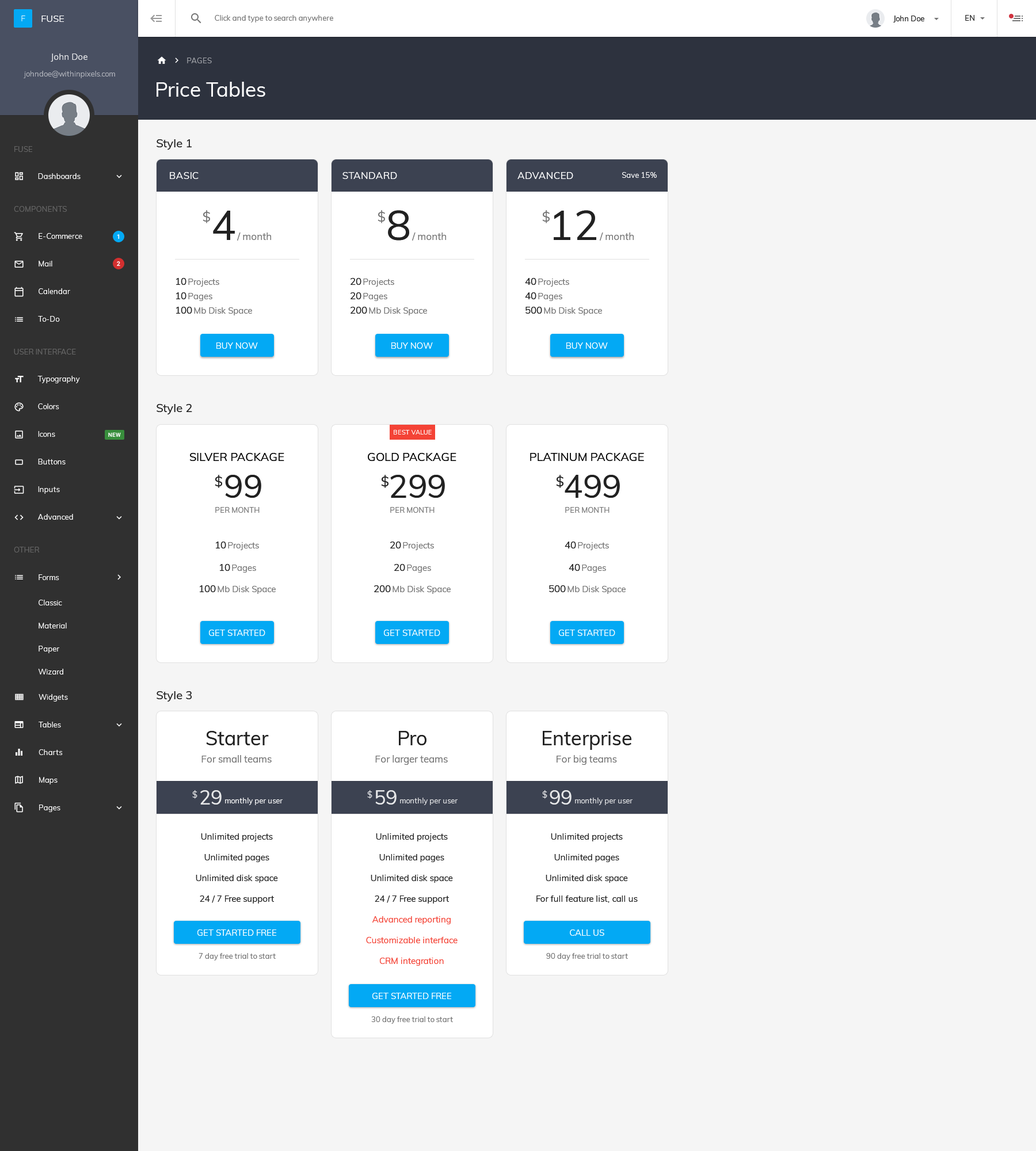
<style>
.page{position:relative;width:1036px;height:1151px;background:#f5f5f5}
.page>*{position:absolute;margin:0}
.t1{font:7.5px "Muli-Regular";color:#9fa1a6}
.t2{font:20.1px "Muli-Regular";color:#ffffff}
.t3{font:11.5px "Muli-Regular";color:#202020}
.t4{font:9.8px "Muli-Regular";color:#ffffff}
.t5{font:7.5px "Muli-Regular";color:#ffffff}
.t6{font:13.8px "Muli-Regular";color:#757575}
.t7{font:41.4px "Muli-Regular";color:#212121}
.t8{font:9.8px "Muli-Regular";color:#757575}
.t9{font:9.8px "Muli-Regular";color:#212121}
.t10{font:8.6px "Muli-Regular";color:#757575}
.t11{font:8.6px "Muli-Regular";color:#ffffff}
.t12{font:6.3px "Muli-Regular";color:#ffffff}
.t13{font:11.5px "Muli-Regular";color:#000000}
.t14{font:13.8px "Muli-Regular";color:#212121}
.t15{font:32.2px "Muli-Regular";color:#212121}
.t16{font:7.5px "Muli-Regular";color:#757575}
.t17{font:19.6px "Muli-Regular";color:#212121}
.t18{font:8.6px "Muli-Regular";color:#e6e7e8}
.t19{font:19.6px "Muli-Regular";color:#e6e7e8}
.t20{font:7.5px "Muli-Regular";color:#e6e7e8}
.t21{font:8.6px/20.7px "Muli-Regular";color:#212121}
.t22{font:8.6px/20.7px "Muli-Regular";color:#f44336}
</style>
<div class="page">
<p class="t1" style="left:187px;top:58px;width:25px;height:5px">PAGES</p>
<p class="t2" style="left:157px;top:82px;width:108px;height:15px">Price Tables</p>
<p class="t3" style="left:157px;top:139px;width:35px;height:11px">Style 1</p>
<p class="t4" style="left:170px;top:172px;width:29px;height:7px">BASIC</p>
<p class="t4" style="left:342px;top:172px;width:55px;height:7px">STANDARD</p>
<p class="t4" style="left:517px;top:172px;width:56px;height:7px">ADVANCED</p>
<p class="t5" style="left:622px;top:172px;width:35px;height:6px">Save 15%</p>
<p class="t6" style="left:203px;top:210px;width:7px;height:13px">$</p>
<p class="t7" style="left:213px;top:211px;width:22px;height:29px">4</p>
<p class="t6" style="left:378px;top:210px;width:7px;height:13px">$</p>
<p class="t7" style="left:388px;top:210px;width:21px;height:31px">8</p>
<p class="t6" style="left:542px;top:210px;width:8px;height:13px">$</p>
<p class="t7" style="left:554px;top:210px;width:42px;height:30px">12</p>
<p class="t8" style="left:237px;top:233px;width:34px;height:8px">/ month</p>
<p class="t8" style="left:412px;top:233px;width:34px;height:8px">/ month</p>
<p class="t8" style="left:600px;top:233px;width:34px;height:8px">/ month</p>
<p class="t9" style="left:176px;top:278px;width:10px;height:7px">10</p>
<p class="t10" style="left:188px;top:279px;width:31px;height:8px">Projects</p>
<p class="t9" style="left:350px;top:278px;width:11px;height:7px">20</p>
<p class="t10" style="left:363px;top:279px;width:31px;height:8px">Projects</p>
<p class="t9" style="left:525px;top:278px;width:11px;height:7px">40</p>
<p class="t10" style="left:538px;top:279px;width:31px;height:8px">Projects</p>
<p class="t9" style="left:176px;top:292px;width:10px;height:7px">10</p>
<p class="t10" style="left:188px;top:293px;width:24px;height:8px">Pages</p>
<p class="t9" style="left:350px;top:292px;width:11px;height:7px">20</p>
<p class="t10" style="left:363px;top:293px;width:24px;height:8px">Pages</p>
<p class="t9" style="left:525px;top:292px;width:11px;height:7px">40</p>
<p class="t10" style="left:538px;top:293px;width:24px;height:8px">Pages</p>
<p class="t9" style="left:176px;top:307px;width:16px;height:7px">100</p>
<p class="t10" style="left:194px;top:307px;width:58px;height:8px">Mb Disk Space</p>
<p class="t9" style="left:350px;top:307px;width:17px;height:7px">200</p>
<p class="t10" style="left:369px;top:307px;width:58px;height:8px">Mb Disk Space</p>
<p class="t9" style="left:525px;top:307px;width:17px;height:7px">500</p>
<p class="t10" style="left:544px;top:307px;width:58px;height:8px">Mb Disk Space</p>
<p class="t11" style="left:216px;top:342px;width:42px;height:7px">BUY NOW</p>
<p class="t11" style="left:391px;top:342px;width:42px;height:7px">BUY NOW</p>
<p class="t11" style="left:566px;top:342px;width:42px;height:7px">BUY NOW</p>
<p class="t3" style="left:157px;top:404px;width:35px;height:11px">Style 2</p>
<p class="t12" style="left:394px;top:430px;width:38px;height:5px">BEST VALUE</p>
<p class="t13" style="left:190px;top:453px;width:94px;height:8px">SILVER PACKAGE</p>
<p class="t13" style="left:368px;top:453px;width:88px;height:8px">GOLD PACKAGE</p>
<p class="t13" style="left:530px;top:453px;width:114px;height:8px">PLATINUM PACKAGE</p>
<p class="t14" style="left:215px;top:475px;width:7px;height:13px">$</p>
<p class="t15" style="left:225px;top:475px;width:36px;height:23px">99</p>
<p class="t14" style="left:381px;top:475px;width:7px;height:13px">$</p>
<p class="t15" style="left:390px;top:475px;width:55px;height:23px">299</p>
<p class="t14" style="left:556px;top:475px;width:7px;height:13px">$</p>
<p class="t15" style="left:565px;top:475px;width:55px;height:23px">499</p>
<p class="t16" style="left:215px;top:507px;width:45px;height:6px">PER MONTH</p>
<p class="t16" style="left:390px;top:507px;width:45px;height:6px">PER MONTH</p>
<p class="t16" style="left:565px;top:507px;width:44px;height:6px">PER MONTH</p>
<p class="t9" style="left:216px;top:542px;width:10px;height:6px">10</p>
<p class="t10" style="left:228px;top:542px;width:31px;height:8px">Projects</p>
<p class="t9" style="left:390px;top:542px;width:11px;height:6px">20</p>
<p class="t10" style="left:403px;top:542px;width:31px;height:8px">Projects</p>
<p class="t9" style="left:565px;top:542px;width:11px;height:6px">40</p>
<p class="t10" style="left:578px;top:542px;width:31px;height:8px">Projects</p>
<p class="t9" style="left:220px;top:564px;width:10px;height:7px">10</p>
<p class="t10" style="left:232px;top:565px;width:24px;height:8px">Pages</p>
<p class="t9" style="left:394px;top:564px;width:11px;height:7px">20</p>
<p class="t10" style="left:407px;top:565px;width:24px;height:8px">Pages</p>
<p class="t9" style="left:569px;top:564px;width:11px;height:7px">40</p>
<p class="t10" style="left:582px;top:565px;width:24px;height:8px">Pages</p>
<p class="t9" style="left:200px;top:585px;width:16px;height:7px">100</p>
<p class="t10" style="left:218px;top:586px;width:58px;height:8px">Mb Disk Space</p>
<p class="t9" style="left:374px;top:585px;width:17px;height:7px">200</p>
<p class="t10" style="left:393px;top:586px;width:58px;height:8px">Mb Disk Space</p>
<p class="t9" style="left:549px;top:585px;width:17px;height:7px">500</p>
<p class="t10" style="left:567px;top:586px;width:59px;height:8px">Mb Disk Space</p>
<p class="t11" style="left:209px;top:630px;width:56px;height:6px">GET STARTED</p>
<p class="t11" style="left:384px;top:630px;width:56px;height:6px">GET STARTED</p>
<p class="t11" style="left:559px;top:630px;width:56px;height:6px">GET STARTED</p>
<p class="t3" style="left:157px;top:691px;width:35px;height:11px">Style 3</p>
<p class="t17" style="left:206px;top:731px;width:63px;height:14px">Starter</p>
<p class="t17" style="left:399px;top:731px;width:27px;height:14px">Pro</p>
<p class="t17" style="left:543px;top:731px;width:88px;height:19px">Enterprise</p>
<p class="t8" style="left:201px;top:755px;width:71px;height:8px">For small teams</p>
<p class="t8" style="left:375px;top:755px;width:73px;height:10px">For larger teams</p>
<p class="t8" style="left:557px;top:755px;width:60px;height:10px">For big teams</p>
<p class="t18" style="left:192px;top:790px;width:5px;height:9px">$</p>
<p class="t19" style="left:200px;top:790px;width:22px;height:15px">29</p>
<p class="t5" style="left:225px;top:798px;width:58px;height:7px">monthly per user</p>
<p class="t18" style="left:367px;top:790px;width:5px;height:9px">$</p>
<p class="t19" style="left:375px;top:790px;width:22px;height:15px">59</p>
<p class="t20" style="left:400px;top:798px;width:58px;height:7px">monthly per user</p>
<p class="t18" style="left:542px;top:790px;width:5px;height:9px">$</p>
<p class="t19" style="left:550px;top:790px;width:21px;height:15px">99</p>
<p class="t20" style="left:575px;top:798px;width:58px;height:7px">monthly per user</p>
<p class="t21" style="left:196px;top:833px;width:82px;height:71px;text-align:center">Unlimited projects<br>Unlimited pages<br>Unlimited disk space<br>24 / 7 Free support</p>
<p class="t21" style="left:371px;top:833px;width:82px;height:71px;text-align:center">Unlimited projects<br>Unlimited pages<br>Unlimited disk space<br>24 / 7 Free support</p>
<p class="t21" style="left:536px;top:833px;width:102px;height:70px;text-align:center">Unlimited projects<br>Unlimited pages<br>Unlimited disk space<br>For full feature list, call us</p>
<p class="t22" style="left:366px;top:916px;width:92px;height:50px;text-align:center">Advanced reporting<br>Customizable interface<br>CRM integration</p>
<p class="t11" style="left:197px;top:929px;width:79px;height:7px">GET STARTED FREE</p>
<p class="t11" style="left:570px;top:929px;width:34px;height:7px">CALL US</p>
<p class="t16" style="left:199px;top:953px;width:77px;height:8px">7 day free trial to start</p>
<p class="t16" style="left:546px;top:953px;width:82px;height:8px">90 day free trial to start</p>
<p class="t11" style="left:372px;top:993px;width:79px;height:6px">GET STARTED FREE</p>
<p class="t16" style="left:371px;top:1016px;width:82px;height:8px">30 day free trial to start</p>
</div>
